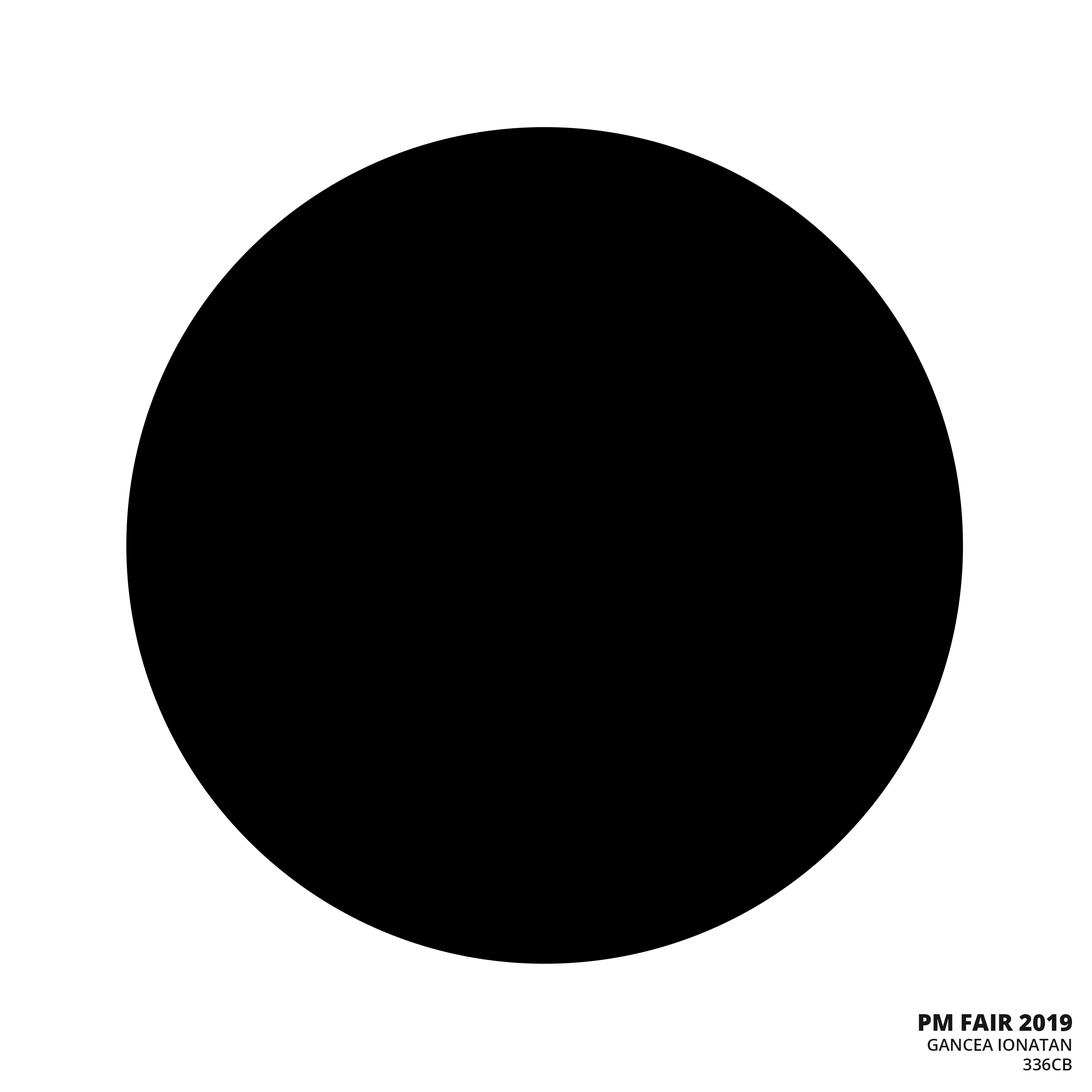
<style>
.page{position:relative;width:1092px;height:1092px;background:#ffffff}
.page>*{position:absolute;margin:0}
.t1{font:23.1px "OpenSans-Extrabold";color:#161616}
.t2{font:16.5px "OpenSans-Semibold";color:#161616}
</style>
<div class="page">
<p class="t1" style="left:919px;top:1014px;width:153px;height:17px">PM FAIR 2019</p>
<p class="t2" style="left:928px;top:1039px;width:144px;height:31px;text-align:right">GANCEA IONATAN<br>336CB</p>
</div>
